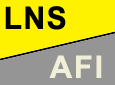
<style>
.page{position:relative;width:115px;height:85px;background:#fff200}
.page>*{position:absolute;margin:0}
.t1{font:31.2px "Arial-BoldMT";letter-spacing:0.05em;color:#000000;scale:0.96 1}
.t2{font:31.2px "Arial-BoldMT";letter-spacing:0.05em;color:#f0f0d8}
</style>
<div class="page">
<p class="t1" style="left:5px;top:6px;width:61px;height:24px">LNS</p>
<p class="t2" style="left:49px;top:55px;width:53px;height:23px">AFI</p>
</div>
